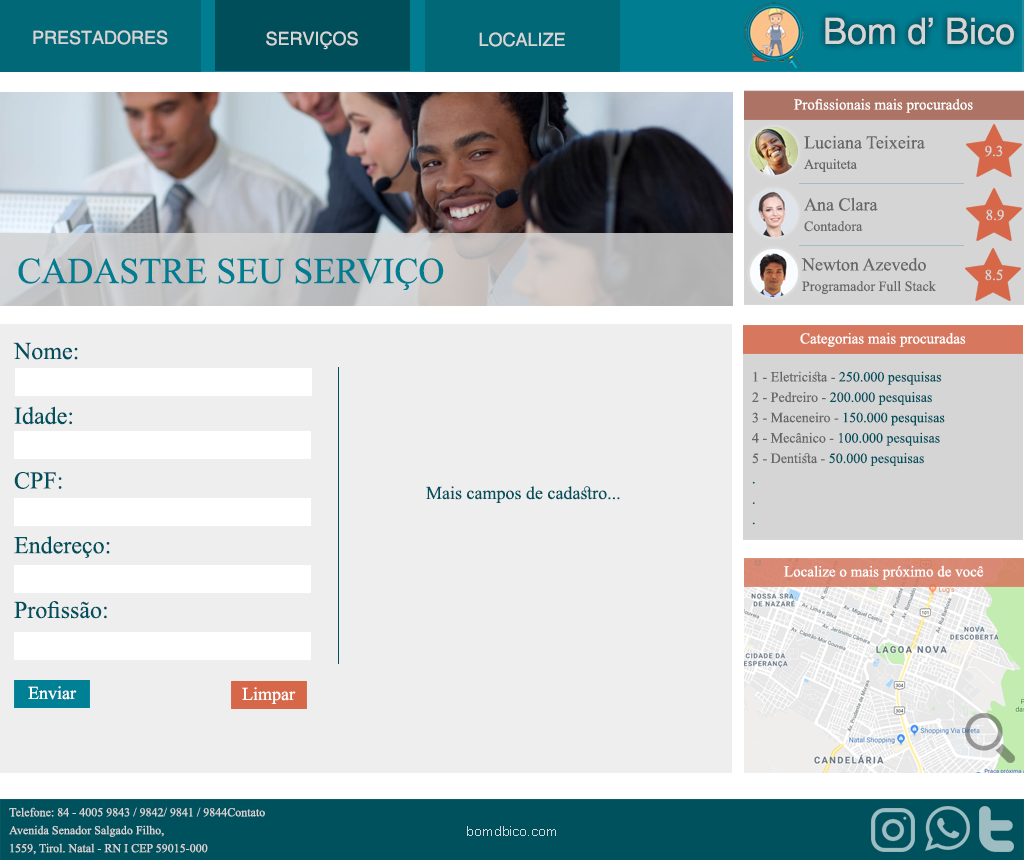
<style>
.page{position:relative;width:1024px;height:860px;background:#eeeeee}
.page>*{position:absolute;margin:0}
.t1{font:36.4px "Helvetica";color:#d5d5d5}
.t2{font:18.2px "Helvetica";color:#d5d5d5}
.t3{font:15.2px "TimesNewRomanPSMT";color:#ffffff}
.t4{font:18.2px "TimesNewRomanPSMT";color:#676767}
.t5{font:14.1px "TimesNewRomanPSMT";color:#676767}
.t6{font:15.2px "TimesNewRomanPSMT";color:#d5d5d5}
.t7{font:36.4px "TimesNewRomanPSMT";color:#007d91}
.t8{font:24.2px "TimesNewRomanPSMT";color:#00515e}
.t9{font:14.1px "TimesNewRomanPSMT";color:#00515e}
.t10{font:18.2px "TimesNewRomanPSMT";color:#00515e}
.t11{font:18.2px "TimesNewRomanPSMT";color:#ffffff}
.t12{font:12.1px "TimesNewRomanPSMT";color:#d5d5d5}
.t13{font:14.1px "MS Sans Serif";color:#d5d5d5}
</style>
<div class="page">
<p class="t1" style="left:825px;top:17px;width:189px;height:28px">Bom d’ Bico</p>
<p class="t2" style="left:33px;top:30px;width:135px;height:15px">PRESTADORES</p>
<p class="t2" style="left:266px;top:31px;width:92px;height:19px">SERVIÇOS</p>
<p class="t2" style="left:479px;top:32px;width:86px;height:15px">LOCALIZE</p>
<p class="t3" style="left:794px;top:98px;width:179px;height:15px">Profissionais mais procurados</p>
<p class="t4" style="left:804px;top:135px;width:121px;height:37px">Luciana Teixeira<br><span class="t5">Arquiteta</span></p>
<p class="t6" style="left:985px;top:145px;width:18px;height:12px">9.3</p>
<p class="t4" style="left:804px;top:197px;width:74px;height:35px">Ana Clara<br><span class="t5">Contadora</span></p>
<p class="t6" style="left:986px;top:209px;width:18px;height:12px">8.9</p>
<p class="t5" style="left:801px;top:257px;width:135px;height:37px"><span class="t4">Newton Azevedo<br></span>Programador Full Stack</p>
<p class="t7" style="left:18px;top:258px;width:426px;height:32px">CADASTRE SEU SERVIÇO</p>
<p class="t6" style="left:985px;top:269px;width:18px;height:12px">8.5</p>
<p class="t8" style="left:13px;top:342px;width:97px;height:277px">Nome:<br><br>Idade:<br><br>CPF:<br><br>Endereço:<br><br>Profissão:</p>
<p class="t3" style="left:800px;top:332px;width:166px;height:15px">Categorias mais procuradas</p>
<p class="t9" style="left:752px;top:371px;width:193px;height:154px"><span class="t5">1 - Eletricista - </span>250.000 pesquisas<br><span class="t5">2 - Pedreiro - </span>200.000 pesquisas<br><span class="t5">3 - Maceneiro - </span>150.000 pesquisas<br><span class="t5">4 - Mecânico - </span>100.000 pesquisas<br><span class="t5">5 - Dentista - </span>50.000 pesquisas<br>.<br>.<br>.</p>
<p class="t10" style="left:426px;top:486px;width:194px;height:17px">Mais campos de cadastro...</p>
<p class="t3" style="left:784px;top:565px;width:200px;height:15px">Localize o mais próximo de você</p>
<p class="t11" style="left:28px;top:686px;width:49px;height:14px">Enviar</p>
<p class="t11" style="left:242px;top:687px;width:54px;height:17px">Limpar</p>
<p class="t12" style="left:9px;top:807px;width:256px;height:48px">Telefone: 84 - 4005 9843 / 9842/ 9841 / 9844Contato<br>Avenida Senador Salgado Filho, <br>1559, Tirol. Natal - RN I CEP 59015-000</p>
<p class="t13" style="left:467px;top:826px;width:89px;height:10px">bomdbico.com</p>
</div>
